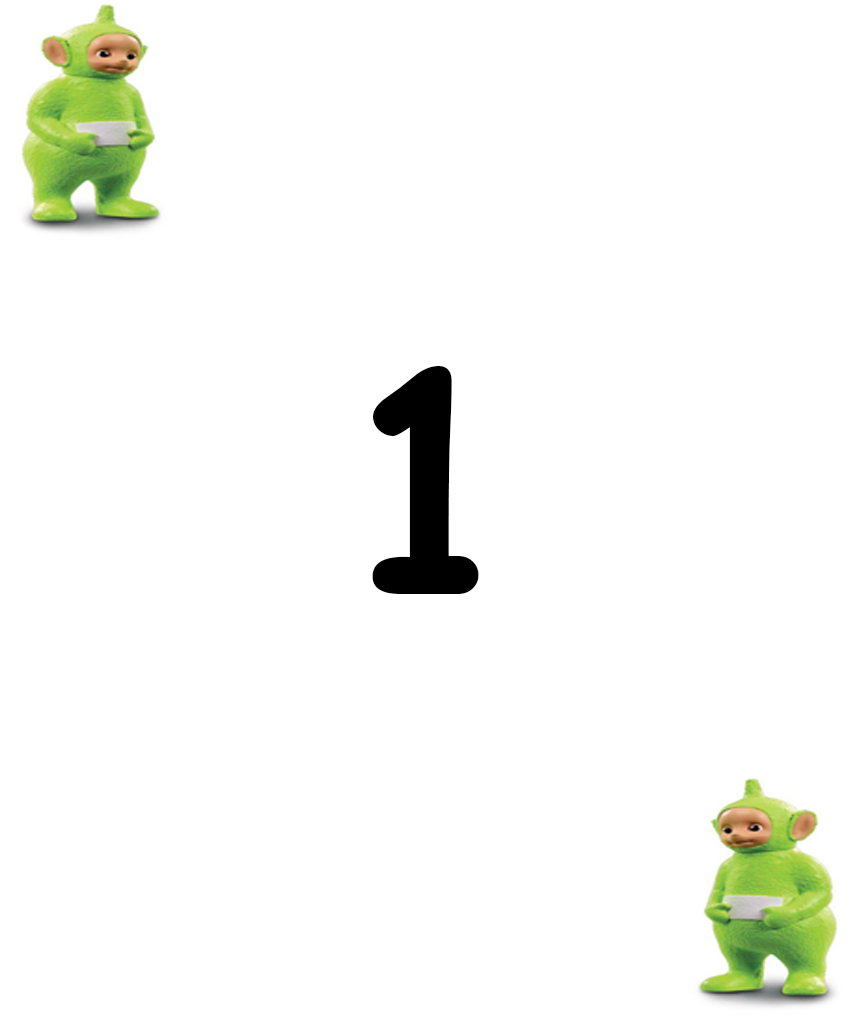
<style>
.page{position:relative;width:859px;height:1020px;background:#ffffff}
.page>*{position:absolute;margin:0}
.t1{font:300px "ComicSansMS-Bold";color:#000000;font-variant:small-caps}
</style>
<div class="page">
<p class="t1" style="left:372px;top:366px;width:107px;height:228px">1</p>
</div>
